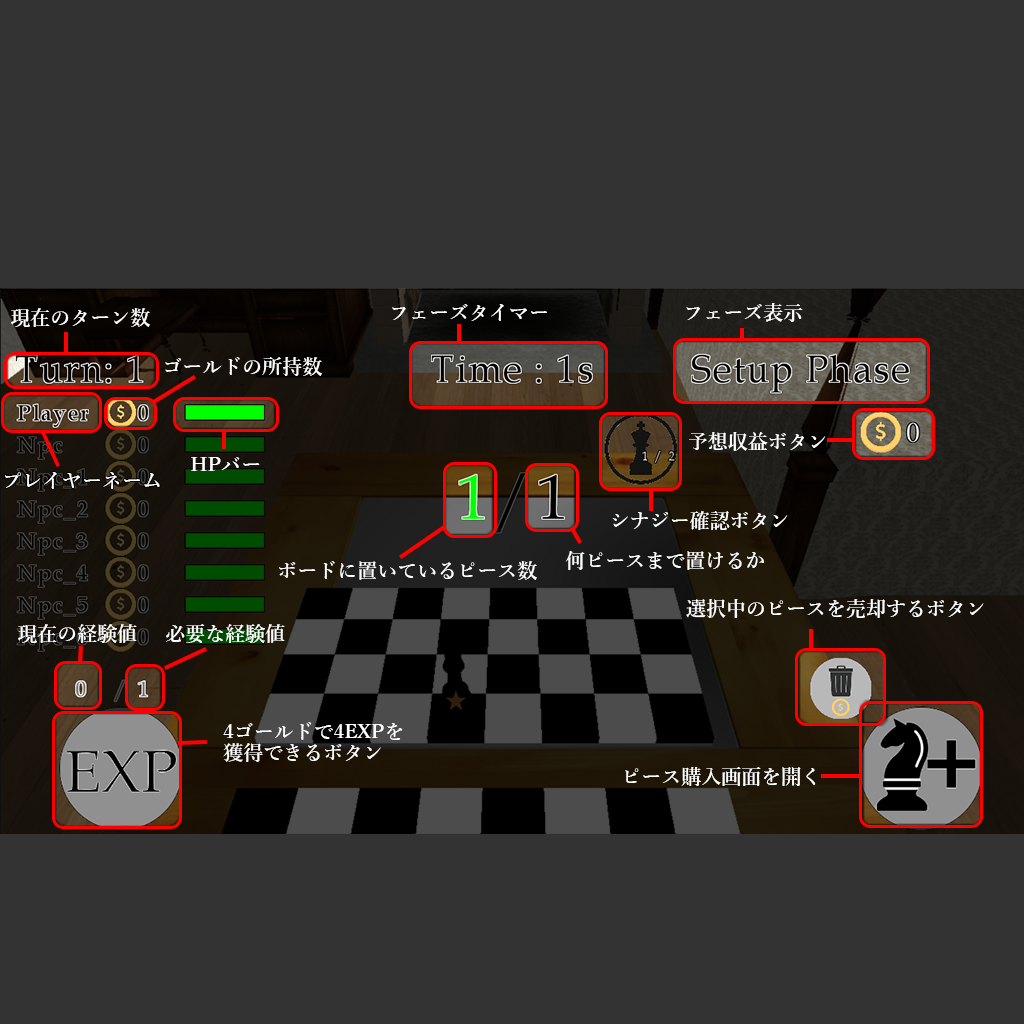
<style>
.page{position:relative;width:1024px;height:1024px;background:#333333}
.page>*{position:absolute;margin:0}
.t1{font:20px "YuMincho-Demibold";color:#ffffff}
.t2{font:20px/21px "YuMincho-Demibold";color:#ffffff}
</style>
<div class="page">
<p class="t1" style="left:392px;top:304px;width:155px;height:17px">フェーズタイマー</p>
<p class="t1" style="left:686px;top:303px;width:117px;height:19px">フェーズ表示</p>
<p class="t1" style="left:11px;top:308px;width:139px;height:19px">現在のターン数</p>
<p class="t1" style="left:165px;top:357px;width:157px;height:19px">ゴールドの所持数</p>
<p class="t1" style="left:689px;top:432px;width:137px;height:19px">予想収益ボタン</p>
<p class="t1" style="left:191px;top:457px;width:69px;height:14px">HPバー</p>
<p class="t1" style="left:5px;top:472px;width:155px;height:17px">プレイヤーネーム</p>
<p class="t1" style="left:612px;top:511px;width:176px;height:19px">シナジー確認ボタン</p>
<p class="t1" style="left:565px;top:551px;width:199px;height:19px">何ピースまで置けるか</p>
<p class="t1" style="left:279px;top:561px;width:258px;height:19px">ボードに置いているピース数</p>
<p class="t1" style="left:686px;top:599px;width:298px;height:19px">選択中のピースを売却するボタン</p>
<p class="t1" style="left:18px;top:624px;width:119px;height:19px">現在の経験値</p>
<p class="t1" style="left:166px;top:624px;width:119px;height:19px">必要な経験値</p>
<p class="t2" style="left:223px;top:722px;width:180px;height:40px">4ゴールドで4EXPを<br>獲得できるボタン</p>
<p class="t1" style="left:625px;top:767px;width:191px;height:19px">ピース購入画面を開く</p>
</div>
